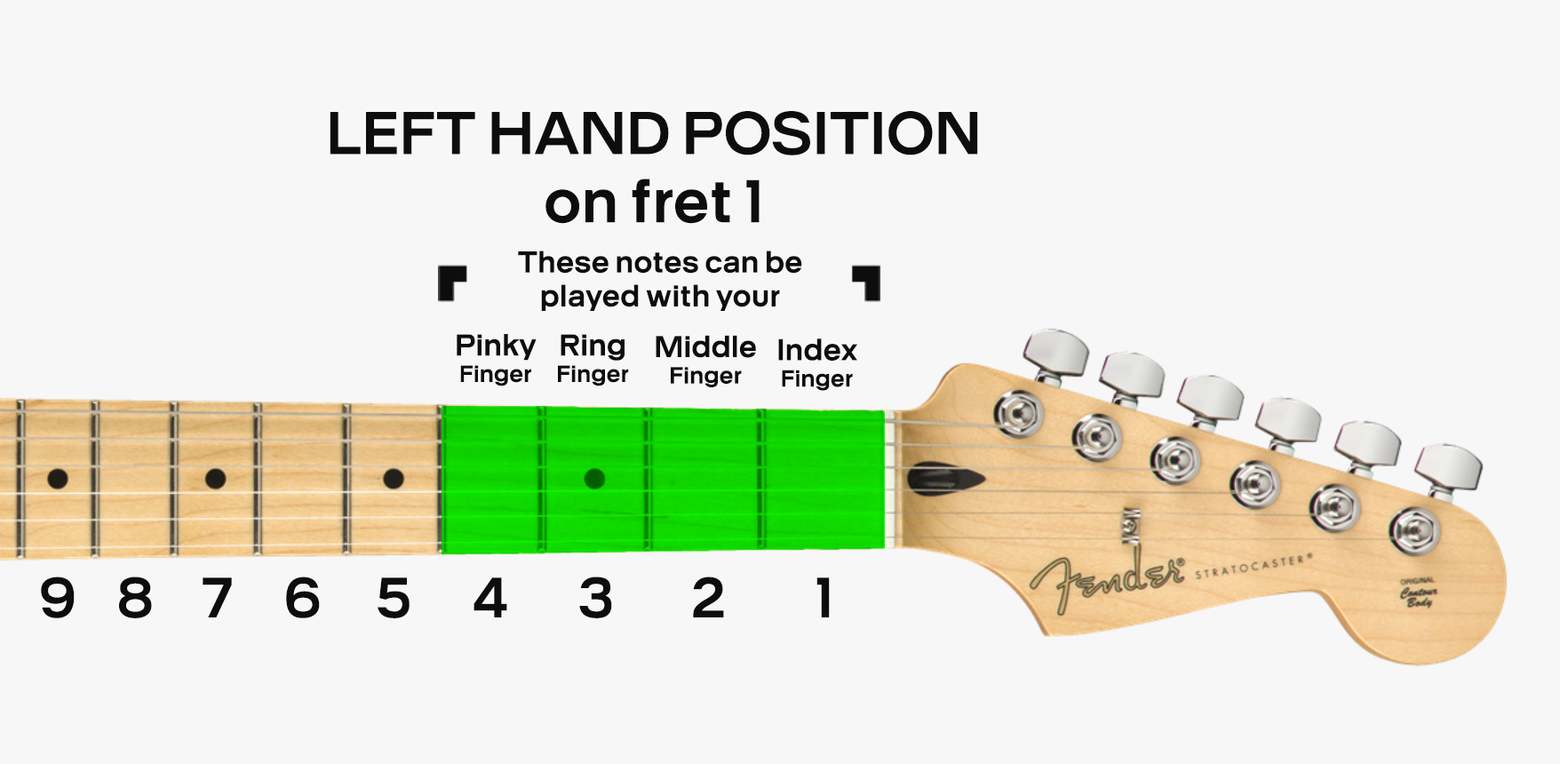
<style>
.page{position:relative;width:1560px;height:764px;background:#f7f7f7}
.page>*{position:absolute;margin:0}
.t1{font:56.9px "Pentatonic-Regular";color:#0d0d0d}
.t2{font:28.2px "Pentatonic-Regular";color:#0d0d0d}
.t3{font:21.9px "Pentatonic-Regular";color:#0d0d0d}
.t4{font:53.3px "Pentatonic-Regular";color:#0d0d0d}
</style>
<div class="page">
<p class="t1" style="left:330px;top:111px;width:648px;height:113px;text-align:center">LEFT HAND POSITION<br>on fret 1</p>
<p class="t2" style="left:518px;top:251px;width:284px;height:60px;text-align:center">These notes can be<br>played with your</p>
<p class="t3" style="left:457px;top:334px;width:80px;height:53px;text-align:center"><span class="t2">Pinky<br></span>Finger</p>
<p class="t3" style="left:558px;top:334px;width:71px;height:53px;text-align:center"><span class="t2">Ring<br></span>Finger</p>
<p class="t2" style="left:656px;top:335px;width:100px;height:52px;text-align:center">Middle<br><span class="t3">Finger</span></p>
<p class="t3" style="left:778px;top:339px;width:79px;height:52px;text-align:center"><span class="t2">Index<br></span>Finger</p>
<p class="t4" style="left:41px;top:577px;width:34px;height:41px">9</p>
<p class="t4" style="left:119px;top:577px;width:33px;height:41px">8</p>
<p class="t4" style="left:203px;top:578px;width:29px;height:40px">7</p>
<p class="t4" style="left:286px;top:577px;width:34px;height:41px">6</p>
<p class="t4" style="left:378px;top:578px;width:32px;height:40px">5</p>
<p class="t4" style="left:474px;top:578px;width:33px;height:40px">4</p>
<p class="t4" style="left:579px;top:577px;width:33px;height:41px">3</p>
<p class="t4" style="left:693px;top:577px;width:31px;height:41px">2</p>
<p class="t4" style="left:817px;top:578px;width:13px;height:40px">1</p>
</div>
